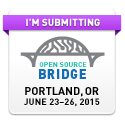
<style>
.page{position:relative;width:125px;height:125px;background:#ffffff}
.page>*{position:absolute;margin:0}
.t1{font:10px "DIN-Black";color:#ffffff}
.t2{font:7px "DINPro-Bold";letter-spacing:0.02em;color:#08b9a6}
.t3{font:13px "DINPro-Black";letter-spacing:0.06em;color:#116db6}
.t4{font:13px "DINPro-Black";letter-spacing:0.02em;color:#116db6}
.t5{font:13px "DINPro-Black";letter-spacing:0.03em;color:#116db6}
.t6{font:9px/10px "DIN-Bold";letter-spacing:0.02em;color:#000000}
.t7{font:11px/10px "DIN-Bold";color:#000000}
</style>
<div class="page">
<p class="t1" style="left:26px;top:18px;width:74px;height:8px">I’M SUBMITTING</p>
<p class="t2" style="left:39px;top:62px;width:48px;height:5px">OPEN SOURCE</p>
<p class="t3" style="left:39px;top:69px;width:47px;height:10px"><span class="t4">B</span>RI<span class="t5">D</span><span class="t4">GE</span></p>
<p class="t6" style="left:24px;top:87px;width:76px;height:20px;text-align:center"><span class="t7">PORTLAND, OR<br></span>JUNE 23–26, 2015</p>
</div>
